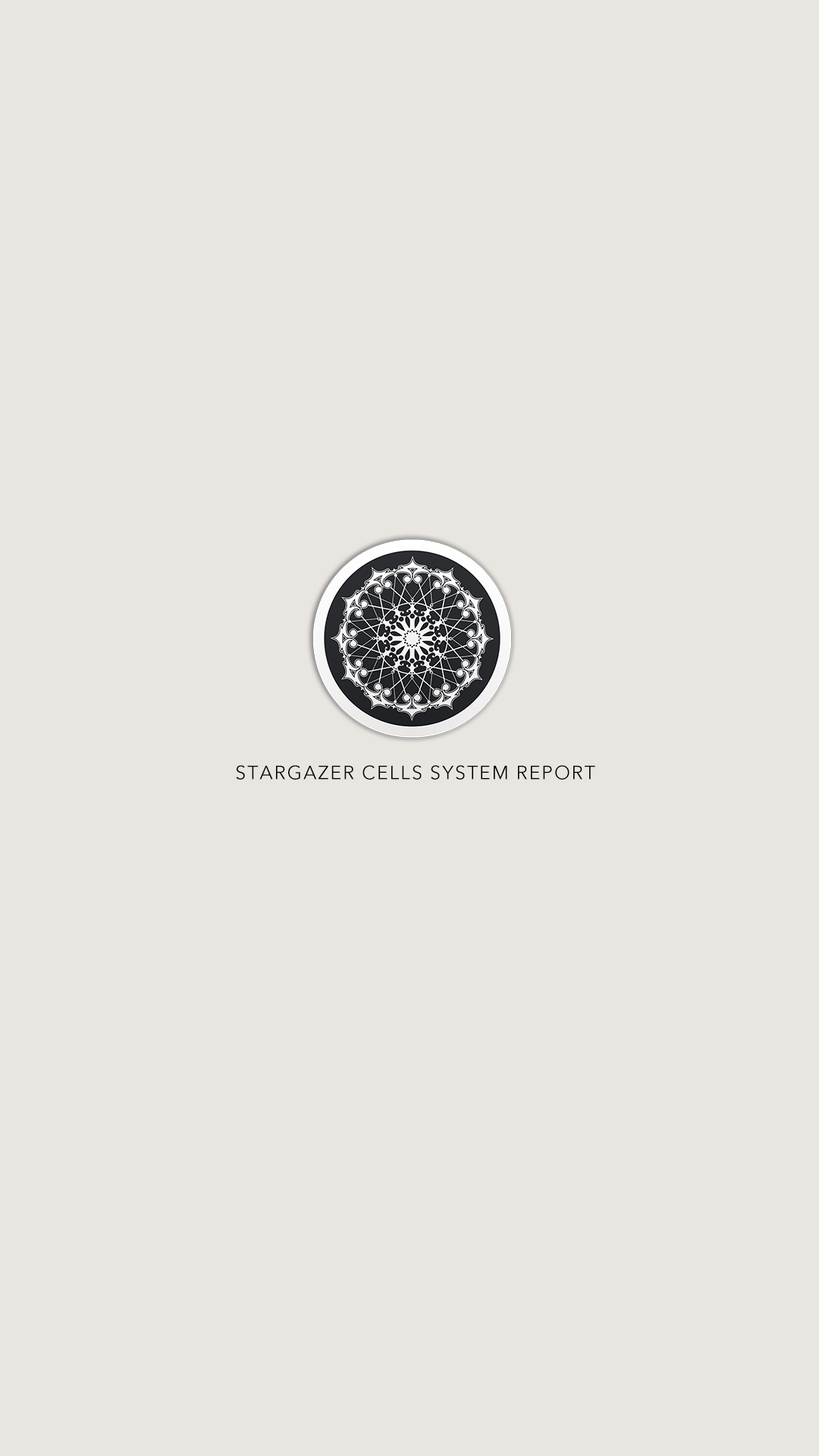
<style>
.page{position:relative;width:819px;height:1456px;background:#e9e6e2}
.page>*{position:absolute;margin:0}
.t1{font:19px "AvenirNext-Regular";letter-spacing:0.075em;color:#000000}
</style>
<div class="page">
<p class="t1" style="left:236px;top:765px;width:359px;height:15px">STARGAZER CELLS SYSTEM REPORT</p>
</div>
